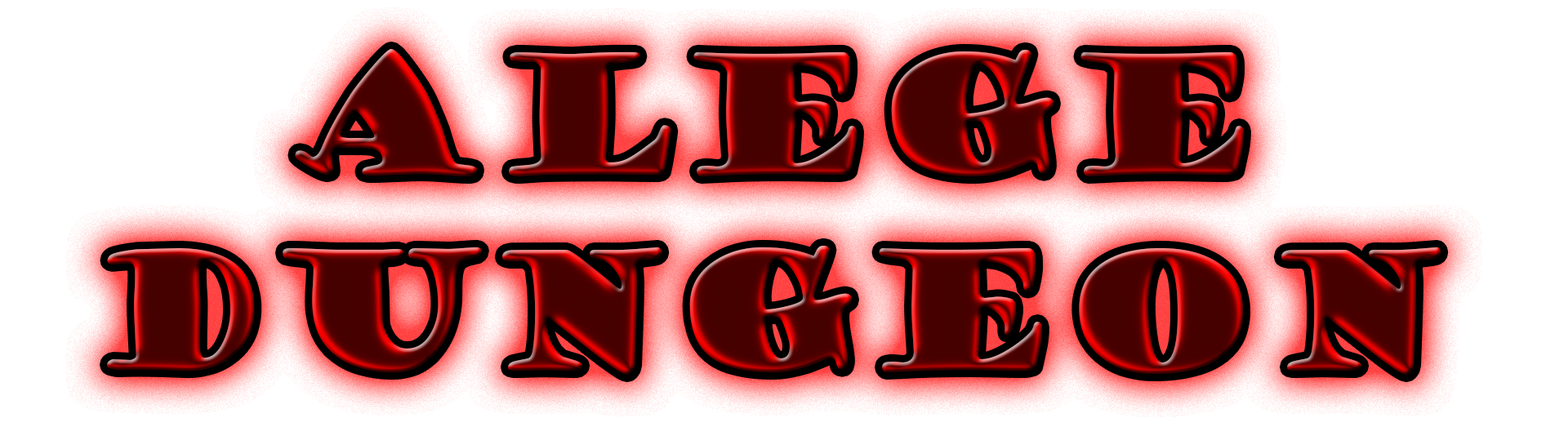
<style>
.page{position:relative;width:1568px;height:440px;background:#ffffff}
.page>*{position:absolute;margin:0}
.t1{font:163.3px "GoudyStout"}
</style>
<div class="page">
<p class="t1" style="left:107px;top:48px;width:1334px;height:327px;text-align:center">Alege<br>dungeon</p>
</div>
